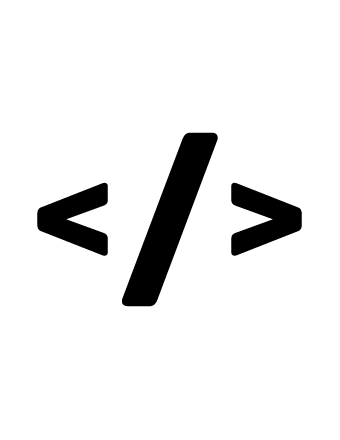
<style>
.page{position:relative;width:340px;height:440px;background:#ffffff}
.page>*{position:absolute;margin:0}
.t1{font:250.2px "Archive";letter-spacing:0.2em;color:#000000}
.t2{font:150.1px "Archive";letter-spacing:0.2em;color:#000000;font-weight:bold}
</style>
<div class="page">
<p class="t1" style="left:122px;top:132px;width:96px;height:175px">/</p>
<p class="t2" style="left:37px;top:182px;width:265px;height:74px">&lt; &gt;</p>
</div>
